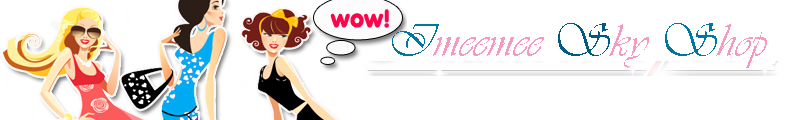
<style>
.page{position:relative;width:800px;height:120px;background:#ffffff}
.page>*{position:absolute;margin:0}
.t1{font:48px "Vivaldii";color:#f49ac1}
.t2{font:48px "Vivaldii";color:#ef97b6}
.t3{font:48px "Vivaldii";color:#0076a3}
.t4{font:48px "Vivaldii";color:#005b7f}
</style>
<div class="page">
<p class="t1" style="left:392px;top:23px;width:375px;height:45px"><span class="t2">                              </span><span class="t3">I</span>meemee <span class="t4">S</span>ky <span class="t3">S</span>hop</p>
</div>
